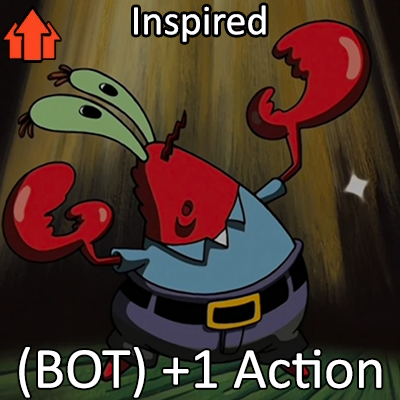
<style>
.page{position:relative;width:400px;height:400px}
.page>*{position:absolute;margin:0}
.t1{font:72px "Calibri";color:#ffffff}
.t2{font:100px "Calibri";color:#ffffff}
</style>
<div class="page">
<p class="t1" style="left:134px;top:5px;width:132px;height:37px">Inspired</p>
<p class="t2" style="left:19px;top:347px;width:363px;height:51px">(BOT) +1 Action</p>
</div>
